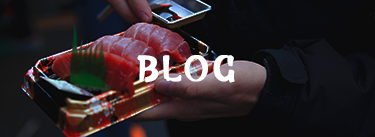
<style>
.page{position:relative;width:375px;height:137px}
.page>*{position:absolute;margin:0}
.t1{font:37.1px "SVN-HiroMisake-Regular";letter-spacing:0.1em;color:#fdfdfd;font-weight:bold}
</style>
<div class="page">
<p class="t1" style="left:137px;top:55px;width:98px;height:28px">Blog</p>
</div>
